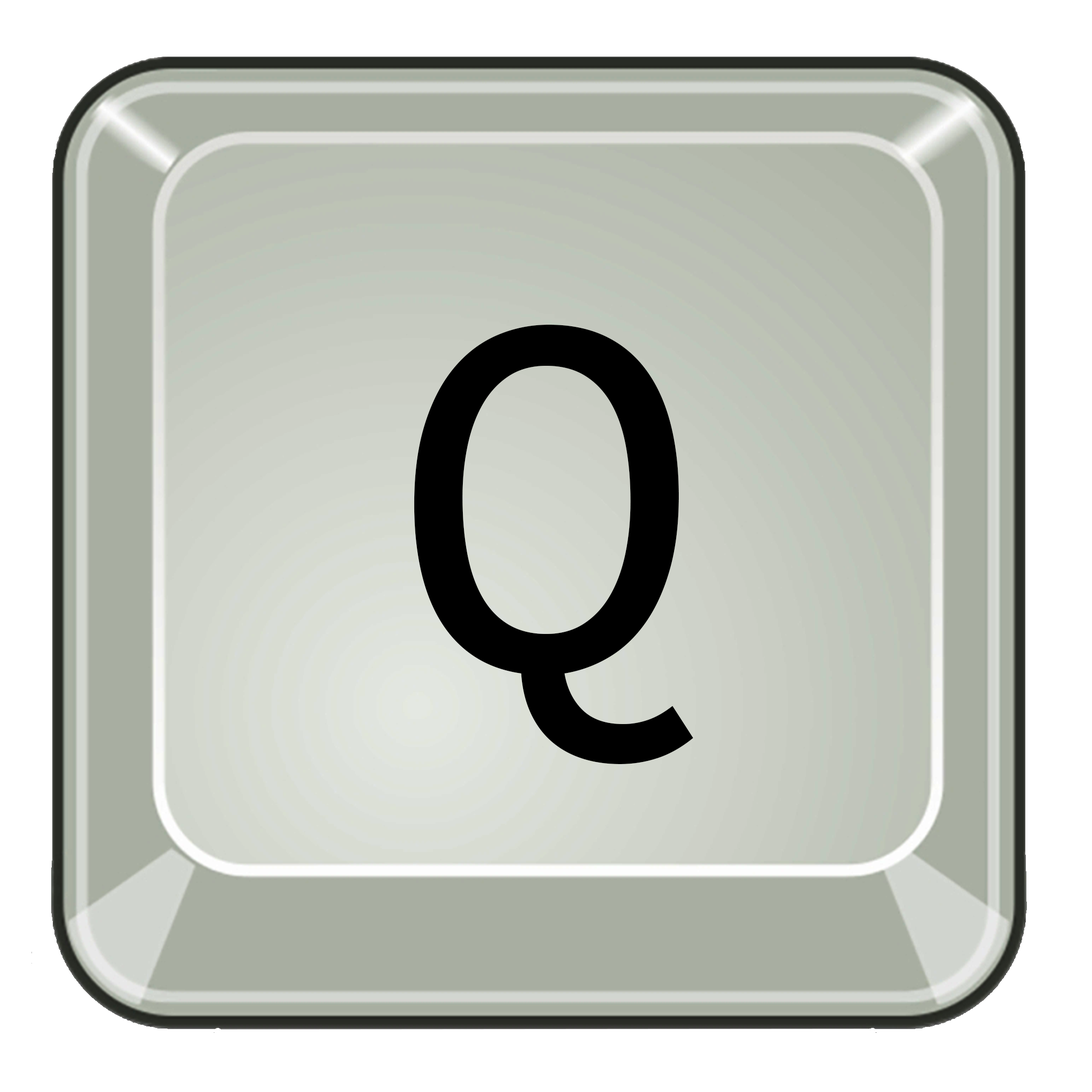
<style>
.page{position:relative;width:1092px;height:1092px;background:#ffffff}
.page>*{position:absolute;margin:0}
.t1{font:534px "Consolas";color:#000000}
</style>
<div class="page">
<p class="t1" style="left:414px;top:325px;width:279px;height:439px">Q</p>
</div>
